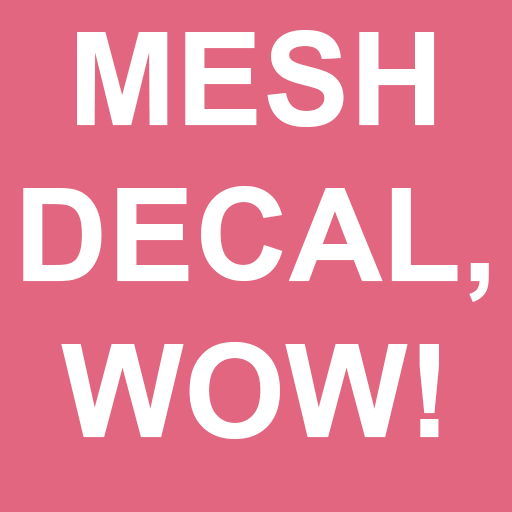
<style>
.page{position:relative;width:512px;height:512px;background:#e26680}
.page>*{position:absolute;margin:0}
.t1{font:130px "Arial-BoldMT";color:#ffffff}
</style>
<div class="page">
<p class="t1" style="left:23px;top:30px;width:466px;height:409px;text-align:center">MESH<br>DECAL,<br>WOW!</p>
</div>
